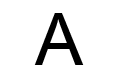
<style>
.page{position:relative;width:120px;height:80px;background:#ffffff}
.page>*{position:absolute;margin:0}
.t1{font:72px "ArialMT";color:#000000}
</style>
<div class="page">
<p class="t1" style="left:34px;top:13px;width:50px;height:52px">A</p>
</div>
